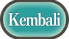
<style>
.page{position:relative;width:69px;height:39px}
.page>*{position:absolute;margin:0}
.t1{font:17px "RyuminPro-ExBold";letter-spacing:-0.08em;color:#ffffff;scale:0.9 1}
</style>
<div class="page">
<p class="t1" style="left:8px;top:12px;width:53px;height:14px">Kembali</p>
</div>
